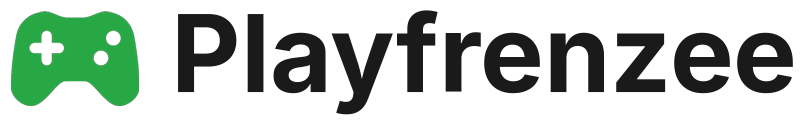
<style>
.page{position:relative;width:810px;height:128px;background:#ffffff}
.page>*{position:absolute;margin:0}
.t1{font:96px "Inter-Bold";color:#1a1a1a}
</style>
<div class="page">
<p class="t1" style="left:178px;top:10px;width:615px;height:105px">Playfrenzee</p>
</div>
